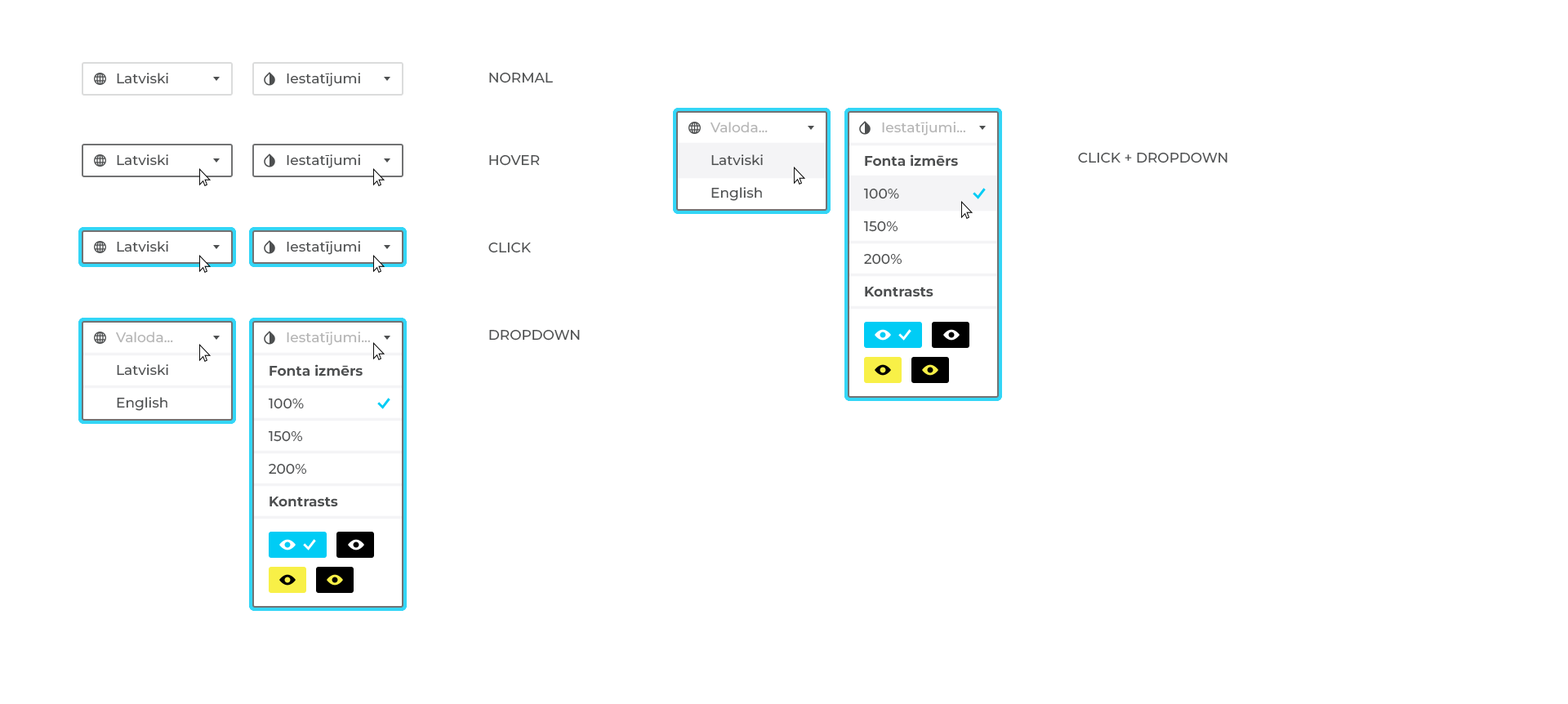
<style>
.page{position:relative;width:1568px;height:704px;background:#ffffff}
.page>*{position:absolute;margin:0}
.t1{font:13.9px "Montserrat-Medium";color:#4d4f50}
.t2{font:13.9px/32.7px "Montserrat-Medium";color:#4d4f50}
.t3{font:13.9px/32.7px "Montserrat-Medium";color:#b5b5b5}
.t4{font:13.9px "Montserrat-Medium";color:#b5b5b5}
.t5{font:13.9px/32.7px "Montserrat-Bold";color:#4d4f50}
</style>
<div class="page">
<p class="t1" style="left:117px;top:73px;width:51px;height:11px">Latviski</p>
<p class="t1" style="left:287px;top:73px;width:73px;height:14px">Iestatījumi</p>
<p class="t1" style="left:489px;top:72px;width:64px;height:11px">NORMAL</p>
<p class="t2" style="left:710px;top:122px;width:58px;height:79px"><span class="t3">Valoda...<br></span>Latviski<br>English</p>
<p class="t4" style="left:882px;top:122px;width:83px;height:14px">Iestatījumi...</p>
<p class="t1" style="left:117px;top:154px;width:51px;height:12px">Latviski</p>
<p class="t1" style="left:287px;top:154px;width:73px;height:14px">Iestatījumi</p>
<p class="t1" style="left:489px;top:154px;width:51px;height:12px">HOVER</p>
<p class="t2" style="left:863px;top:154px;width:95px;height:143px"><span class="t5">Fonta izmērs<br></span>100%<br>150%<br>200%<br><span class="t5">Kontrasts</span></p>
<p class="t1" style="left:1078px;top:152px;width:149px;height:11px">CLICK + DROPDOWN</p>
<p class="t1" style="left:117px;top:241px;width:51px;height:11px">Latviski</p>
<p class="t1" style="left:287px;top:241px;width:73px;height:14px">Iestatījumi</p>
<p class="t1" style="left:488px;top:242px;width:43px;height:11px">CLICK</p>
<p class="t1" style="left:489px;top:329px;width:91px;height:12px">DROPDOWN</p>
<p class="t2" style="left:116px;top:332px;width:57px;height:79px"><span class="t3">Valoda...<br></span>Latviski<br>English</p>
<p class="t4" style="left:287px;top:332px;width:83px;height:13px">Iestatījumi...</p>
<p class="t2" style="left:268px;top:364px;width:95px;height:143px"><span class="t5">Fonta izmērs<br></span>100%<br>150%<br>200%<br><span class="t5">Kontrasts</span></p>
</div>
